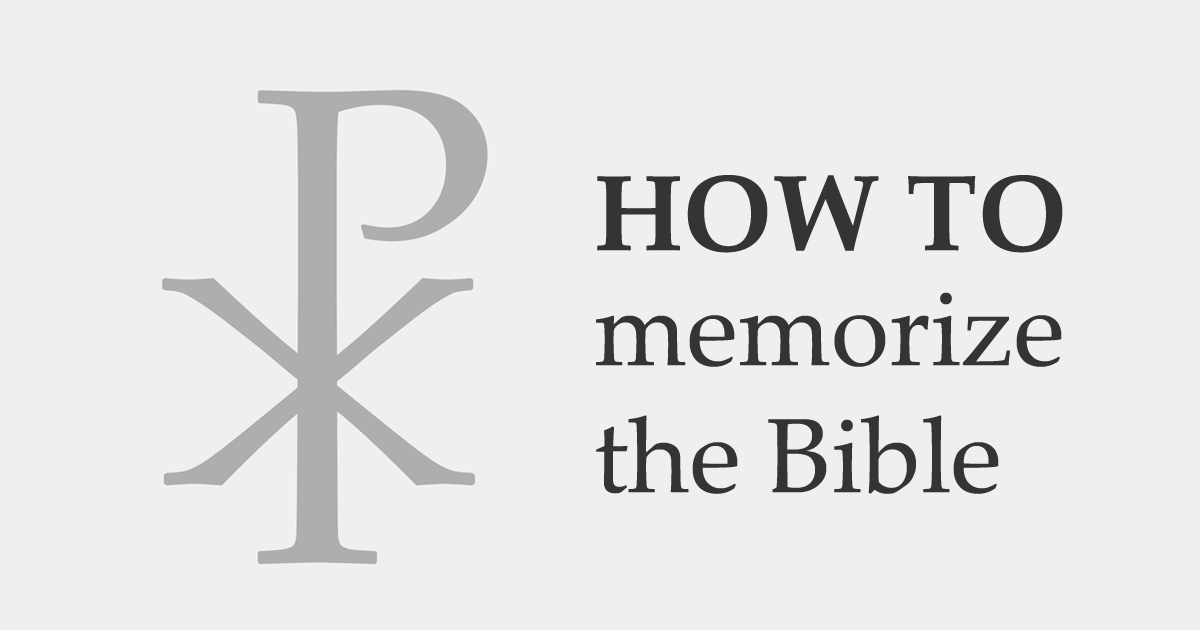
<style>
.page{position:relative;width:1200px;height:630px;background:#efefef}
.page>*{position:absolute;margin:0}
.t1{font:107.1px "PalatinoLinotype-Bold";color:#333533}
.t2{font:105.7px "PalatinoLinotype-Roman";color:#333533}
</style>
<div class="page">
<p class="t1" style="left:597px;top:175px;width:466px;height:78px">HOW TO</p>
<p class="t2" style="left:596px;top:292px;width:466px;height:202px">memorize<br>the Bible</p>
</div>
